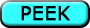
<style>
.page{position:relative;width:90px;height:28px;background:#34fdff}
.page>*{position:absolute;margin:0}
.t1{font:19px "Verdana";color:#000000;font-weight:bold}
</style>
<div class="page">
<p class="t1" style="left:21px;top:6px;width:50px;height:15px">PEEK</p>
</div>
